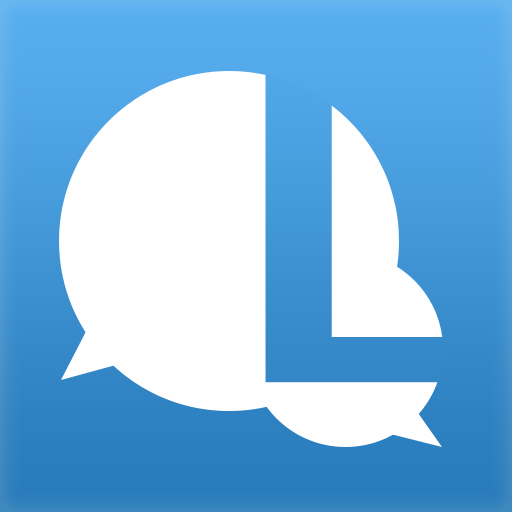
<style>
.page{position:relative;width:512px;height:512px;background:#ffffff}
.page>*{position:absolute;margin:0}
.t1{font:439.1px "LucidaGrande-Bold";letter-spacing:0.02em;color:#3c91d0}
</style>
<div class="page">
<p class="t1" style="left:265px;top:64px;width:210px;height:319px">L</p>
</div>
